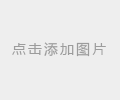
<style>
.page{position:relative;width:120px;height:100px;background:#eeeeee}
.page>*{position:absolute;margin:0}
.t1{font:14px "MicrosoftYaHei";letter-spacing:0.14em;color:#9c9c9c}
</style>
<div class="page">
<p class="t1" style="left:12px;top:42px;width:94px;height:15px">点击添加图片</p>
</div>
